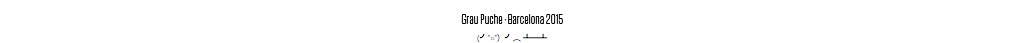
<style>
.page{position:relative;width:1024px;height:43px;background:#ffffff}
.page>*{position:absolute;margin:0}
.t1{font:14px "Tungsten-Light";color:#010101}
</style>
<div class="page">
<p class="t1" style="left:461px;top:14px;width:102px;height:10px">Grau Puche · Barcelona 2015</p>
</div>
